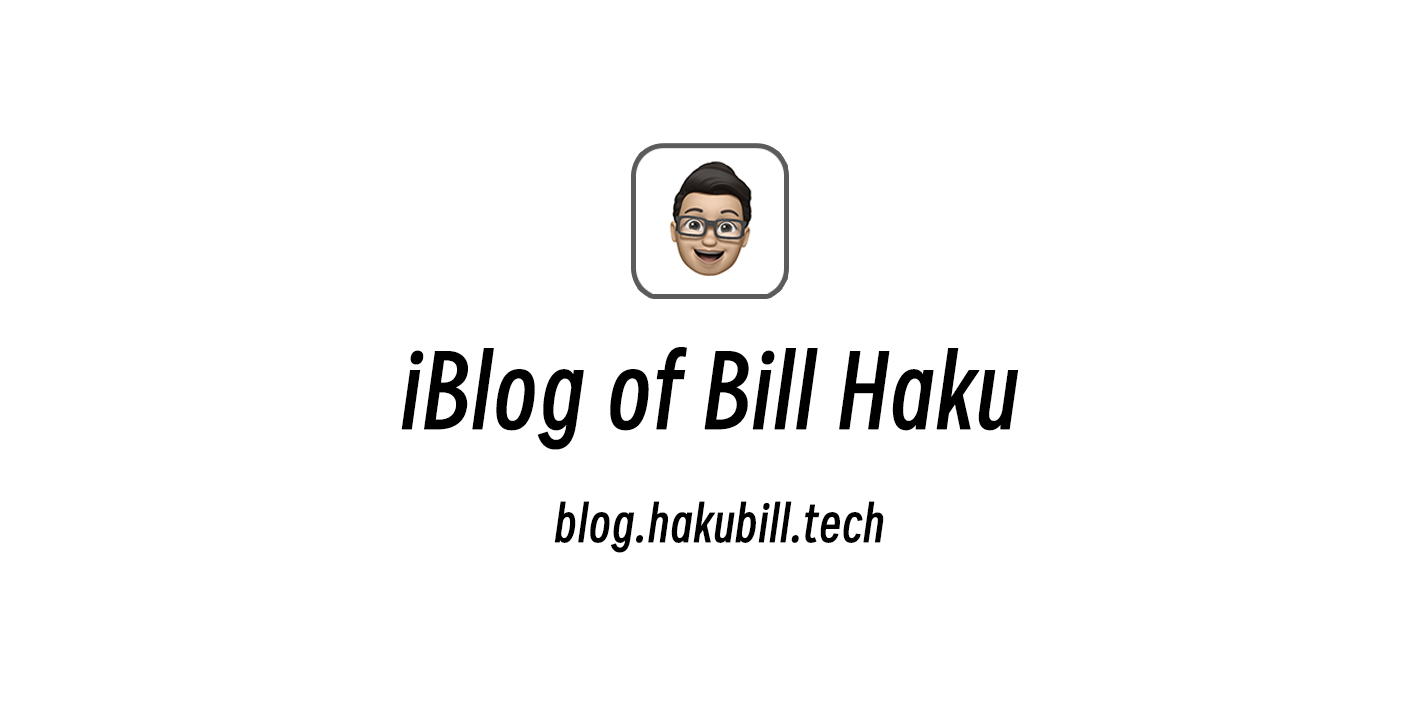
<style>
.page{position:relative;width:1420px;height:708px;background:#ffffff}
.page>*{position:absolute;margin:0}
.t1{font:96px "SmileySans-Oblique";color:#000000;font-weight:bold}
.t2{font:48px "SmileySans-Oblique";color:#000000;font-weight:bold}
</style>
<div class="page">
<p class="t1" style="left:401px;top:347px;width:618px;height:103px">iBlog of Bill Haku</p>
<p class="t2" style="left:554px;top:501px;width:330px;height:52px">blog.hakubill.tech</p>
</div>
